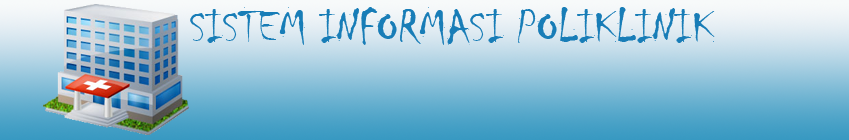
<style>
.page{position:relative;width:849px;height:140px}
.page>*{position:absolute;margin:0}
.t1{font:48px "Chiller-Regular";color:#187db7}
</style>
<div class="page">
<p class="t1" style="left:190px;top:7px;width:525px;height:38px">SISTEM INFORMASI POLIKLINIK</p>
</div>
